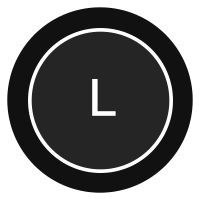
<style>
.page{position:relative;width:200px;height:200px;background:#252525}
.page>*{position:absolute;margin:0}
.t1{font:51.1px "ArialMT";color:#ffffff}
</style>
<div class="page">
<p class="t1" style="left:92px;top:79px;width:24px;height:37px">L</p>
</div>
